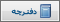
<style>
.page{position:relative;width:60px;height:22px}
.page>*{position:absolute;margin:0}
.t1{font:8px "Tahoma"}
</style>
<div class="page">
<p class="t1" style="left:11px;top:8px;width:26px;height:8px">دفتـرچه</p>
</div>
